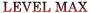
<style>
.page{position:relative;width:92px;height:13px;background:#ffffff}
.page>*{position:absolute;margin:0}
.t1{font:13.3px "CenturySchoolbook";letter-spacing:0.025em}
</style>
<div class="page">
<p class="t1" style="left:3px;top:1px;width:85px;height:11px">LEVEL MAX</p>
</div>
